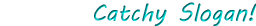
<style>
.page{position:relative;width:256px;height:26px;background:#ffffff}
.page>*{position:absolute;margin:0}
.t1{font:24px "MVBoli"}
</style>
<div class="page">
<p class="t1" style="left:94px;top:2px;width:163px;height:25px">Catchy Slogan!</p>
</div>
